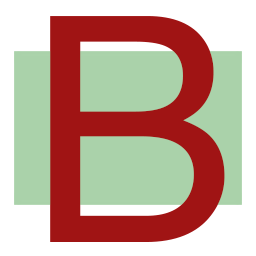
<style>
.page{position:relative;width:256px;height:256px;background:#ffffff}
.page>*{position:absolute;margin:0}
.t1{font:315.1px "Helvetica";color:#a01414}
</style>
<div class="page">
<p class="t1" style="left:50px;top:16px;width:175px;height:226px">B</p>
</div>
